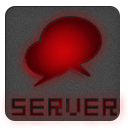
<style>
.page{position:relative;width:128px;height:128px}
.page>*{position:absolute;margin:0}
.t1{font:17.8px "DrifterFive";letter-spacing:0.025em;color:#380b0e}
</style>
<div class="page">
<p class="t1" style="left:11px;top:98px;width:106px;height:18px">SERVER</p>
</div>
